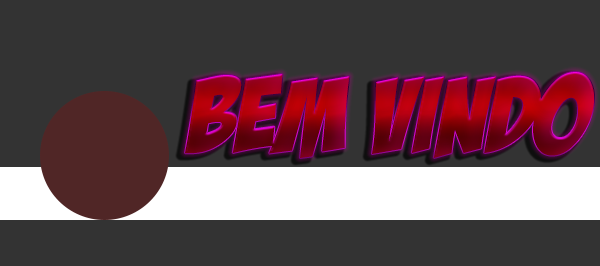
<style>
.page{position:relative;width:600px;height:266px;background:#333333}
.page>*{position:absolute;margin:0}
.t1{font:105.7px "BadaBoomBB";text-transform:uppercase;scale:1.06 1}
</style>
<div class="page">
<p class="t1" style="left:185px;top:72px;width:409px;height:86px">Bem Vindo</p>
</div>
